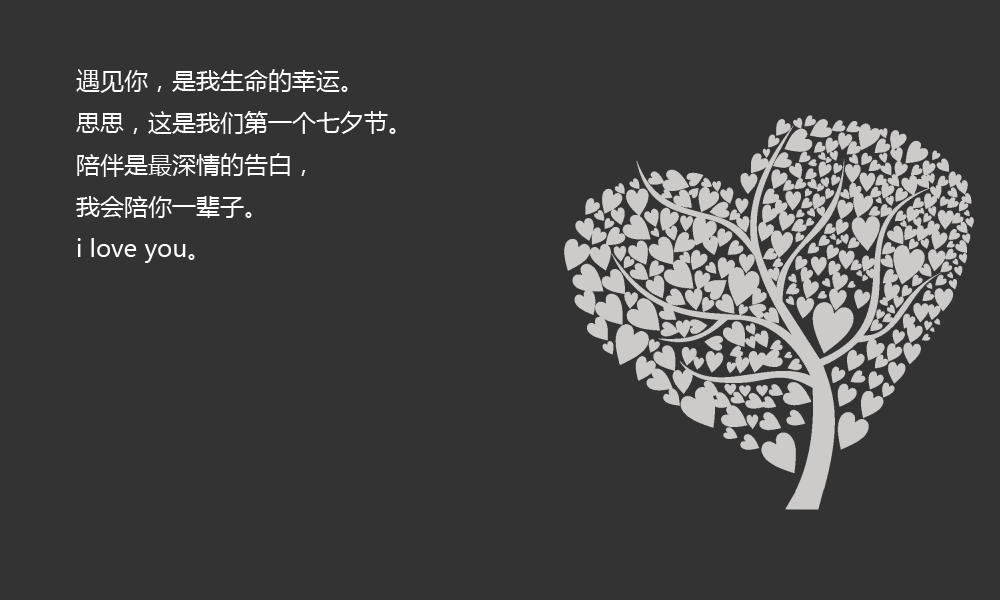
<style>
.page{position:relative;width:1000px;height:600px;background:#333333}
.page>*{position:absolute;margin:0}
.t1{font:24px "MicrosoftYaHei";color:#ffffff}
</style>
<div class="page">
<p class="t1" style="left:76px;top:69px;width:320px;height:194px">遇见你，是我生命的幸运。<br>思思，这是我们第一个七夕节。<br>陪伴是最深情的告白，<br>我会陪你一辈子。<br>i love you。</p>
</div>
